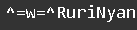
<style>
.page{position:relative;width:137px;height:30px;background:#333333}
.page>*{position:absolute;margin:0}
.t1{font:18px "Consolas";color:#ffffff}
</style>
<div class="page">
<p class="t1" style="left:7px;top:5px;width:128px;height:17px">^=w=^RuriNyan</p>
</div>
